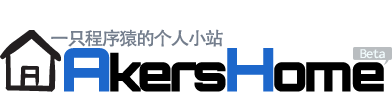
<style>
.page{position:relative;width:392px;height:100px;background:#ffffff}
.page>*{position:absolute;margin:0}
.t1{font:18px "AdobeHeitiStd-Regular";letter-spacing:-0.08em;color:#747e8d;scale:1.04 1}
.t2{font:14px "Inconsolata";letter-spacing:-0.08em;color:#f1fbfd;scale:1.04 1}
</style>
<div class="page">
<p class="t1" style="left:51px;top:29px;width:172px;height:18px">一只程序猿的个人小站</p>
<p class="t2" style="left:360px;top:49px;width:25px;height:10px">Beta</p>
</div>
